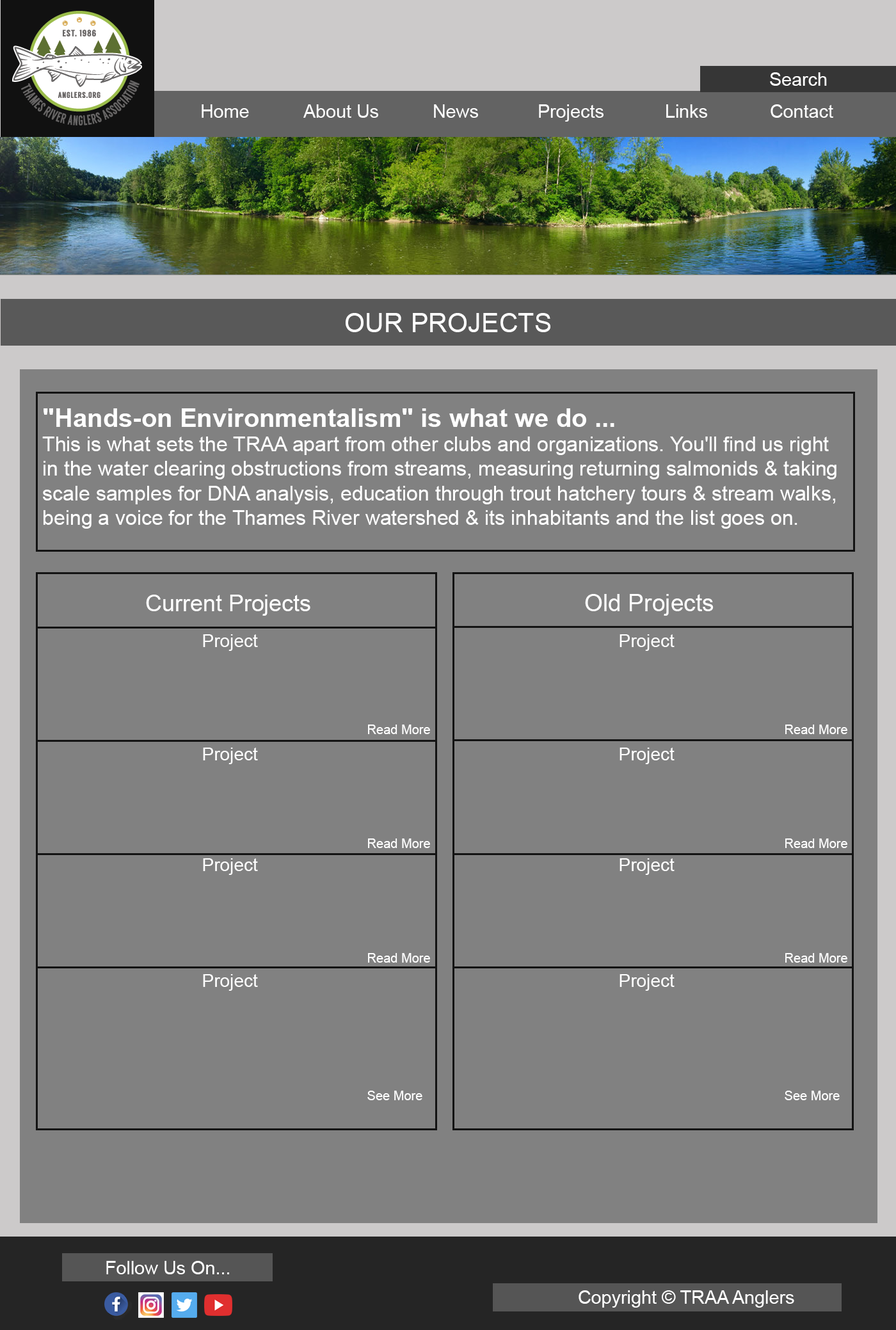
<style>
.page{position:relative;width:896px;height:1330px;background:#818181}
.page>*{position:absolute;margin:0}
.t1{font:18.4px "ArialMT";color:#ffffff}
.t2{font:26.5px "ArialMT";color:#ffffff}
.t3{font:20.5px "ArialMT";color:#ffffff}
.t4{font:25.6px "Arial-BoldMT";color:#ffffff}
.t5{font:23px "ArialMT";color:#ffffff}
.t6{font:23.9px "ArialMT";color:#ffffff}
.t7{font:17.9px "ArialMT";color:#ffffff}
.t8{font:12.8px "ArialMT";color:#ffffff}
</style>
<div class="page">
<p class="t1" style="left:770px;top:72px;width:57px;height:14px">Search</p>
<p class="t1" style="left:770px;top:72px;width:57px;height:14px">Search</p>
<p class="t1" style="left:202px;top:104px;width:47px;height:14px">Home</p>
<p class="t1" style="left:303px;top:104px;width:75px;height:14px">About Us</p>
<p class="t1" style="left:434px;top:104px;width:44px;height:14px">News</p>
<p class="t1" style="left:539px;top:104px;width:65px;height:18px">Projects</p>
<p class="t1" style="left:666px;top:104px;width:41px;height:14px">Links</p>
<p class="t1" style="left:771px;top:104px;width:63px;height:14px">Contact</p>
<p class="t2" style="left:346px;top:313px;width:205px;height:19px">OUR PROJECTS</p>
<p class="t3" style="left:42px;top:408px;width:795px;height:121px"><span class="t4">"Hands-on Environmentalism" is what we do ...<br></span>This is what sets the TRAA apart from other clubs and organizations. You'll find us right in the water clearing obstructions from streams, measuring returning salmonids &amp; taking scale samples for DNA analysis, education through trout hatchery tours &amp; stream walks, being a voice for the Thames River watershed &amp; its inhabitants and the list goes on.</p>
<p class="t5" style="left:146px;top:595px;width:165px;height:21px">Current Projects</p>
<p class="t6" style="left:585px;top:594px;width:129px;height:22px">Old Projects</p>
<p class="t7" style="left:203px;top:634px;width:55px;height:17px">Project</p>
<p class="t7" style="left:620px;top:634px;width:55px;height:17px">Project</p>
<p class="t8" style="left:368px;top:725px;width:62px;height:9px">Read More</p>
<p class="t8" style="left:786px;top:725px;width:62px;height:9px">Read More</p>
<p class="t7" style="left:203px;top:748px;width:55px;height:16px">Project</p>
<p class="t7" style="left:620px;top:748px;width:55px;height:16px">Project</p>
<p class="t8" style="left:368px;top:839px;width:62px;height:9px">Read More</p>
<p class="t8" style="left:786px;top:839px;width:62px;height:9px">Read More</p>
<p class="t7" style="left:203px;top:859px;width:55px;height:16px">Project</p>
<p class="t7" style="left:620px;top:859px;width:55px;height:16px">Project</p>
<p class="t8" style="left:368px;top:953px;width:62px;height:10px">Read More</p>
<p class="t8" style="left:786px;top:953px;width:62px;height:10px">Read More</p>
<p class="t7" style="left:203px;top:974px;width:55px;height:17px">Project</p>
<p class="t7" style="left:620px;top:974px;width:55px;height:17px">Project</p>
<p class="t8" style="left:367px;top:1091px;width:56px;height:10px">See More</p>
<p class="t8" style="left:785px;top:1091px;width:55px;height:10px">See More</p>
<p class="t1" style="left:106px;top:1261px;width:123px;height:14px">Follow Us On...</p>
<p class="t1" style="left:106px;top:1261px;width:123px;height:14px">Follow Us On...</p>
<p class="t1" style="left:579px;top:1291px;width:216px;height:17px">Copyright © TRAA Anglers</p>
</div>
